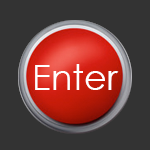
<style>
.page{position:relative;width:150px;height:150px;background:#333333}
.page>*{position:absolute;margin:0}
.t1{font:35px "CenturyGothic";color:#ffffff}
</style>
<div class="page">
<p class="t1" style="left:35px;top:64px;width:84px;height:26px">Enter</p>
</div>
